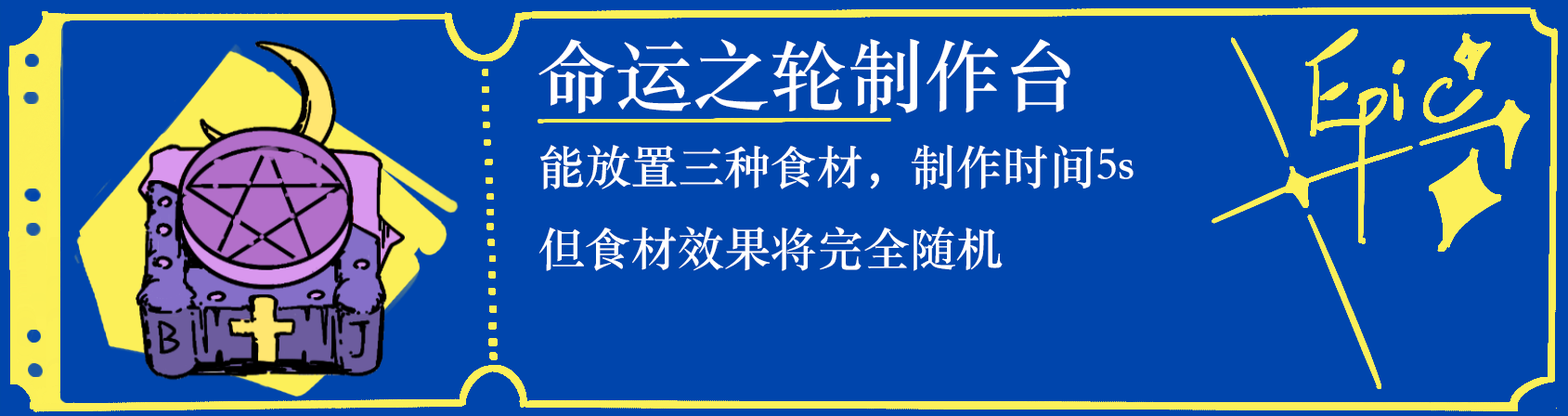
<style>
.page{position:relative;width:1568px;height:416px;background:#0045ac}
.page>*{position:absolute;margin:0}
.t1{font:77.4px "STSongti-SC-Bold";color:#ffffff}
.t2{font:46.4px "STSongti-SC-Bold";color:#ffffff}
</style>
<div class="page">
<p class="t1" style="left:538px;top:39px;width:532px;height:74px">命运之轮制作台</p>
<p class="t2" style="left:538px;top:145px;width:596px;height:126px">能放置三种食材，制作时间5s<br>但食材效果将完全随机</p>
</div>
